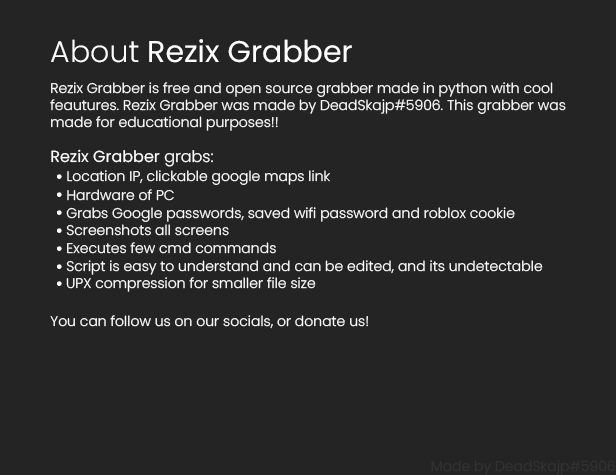
<style>
.page{position:relative;width:616px;height:475px;background:#242424}
.page>*{position:absolute;margin:0}
.t1{font:30px "Poppins-Regular";color:#ffffff}
.t2{font:30px "Poppins-Light";color:#ffffff}
.t3{font:14px "Poppins-Light";color:#ffffff}
.t4{font:16px "Poppins-Regular";color:#ffffff}
.t5{font:16px "Poppins-Light";color:#ffffff}
.t6{font:14px "Poppins-Light";color:#323232}
</style>
<div class="page">
<p class="t1" style="left:51px;top:39px;width:301px;height:24px"><span class="t2">About </span>Rezix Grabber</p>
<p class="t3" style="left:50px;top:82px;width:516px;height:49px">Rezix Grabber is free and open source grabber made in python with cool <br>feautures. Rezix Grabber was made by DeadSkajp#5906. This grabber was<br>made for educational purposes!!</p>
<p class="t4" style="left:51px;top:149px;width:162px;height:18px">Rezix Grabber<span class="t5"> grabs:</span></p>
<p class="t3" style="left:67px;top:170px;width:263px;height:15px">Location IP, clickable google maps link</p>
<p class="t3" style="left:67px;top:189px;width:107px;height:12px">Hardware of PC</p>
<p class="t3" style="left:66px;top:207px;width:449px;height:15px">Grabs Google passwords, saved wifi password and roblox cookie</p>
<p class="t3" style="left:66px;top:224px;width:163px;height:12px">Screenshots all screens</p>
<p class="t3" style="left:67px;top:242px;width:209px;height:12px">Executes few cmd commands</p>
<p class="t3" style="left:66px;top:260px;width:477px;height:15px">Script is easy to understand and can be edited, and its undetectable</p>
<p class="t3" style="left:66px;top:277px;width:250px;height:15px">UPX compression for smaller file size</p>
<p class="t3" style="left:50px;top:315px;width:318px;height:14px">You can follow us on our socials, or donate us!</p>
<p class="t6" style="left:431px;top:460px;width:184px;height:15px">Made by DeadSkajp#5906</p>
</div>
